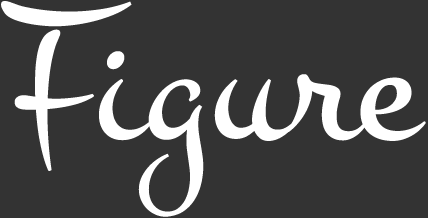
<style>
.page{position:relative;width:428px;height:218px;background:#333333}
.page>*{position:absolute;margin:0}
.t1{font:200px "Montez-Regular";letter-spacing:-0.005em;color:#ffffff;font-weight:bold}
.t2{font:200px "Montez-Regular";letter-spacing:-0.015em;color:#ffffff;font-weight:bold}
</style>
<div class="page">
<p class="t1" style="left:1px;top:1px;width:425px;height:216px">Fig<span class="t2">ur</span>e</p>
</div>
